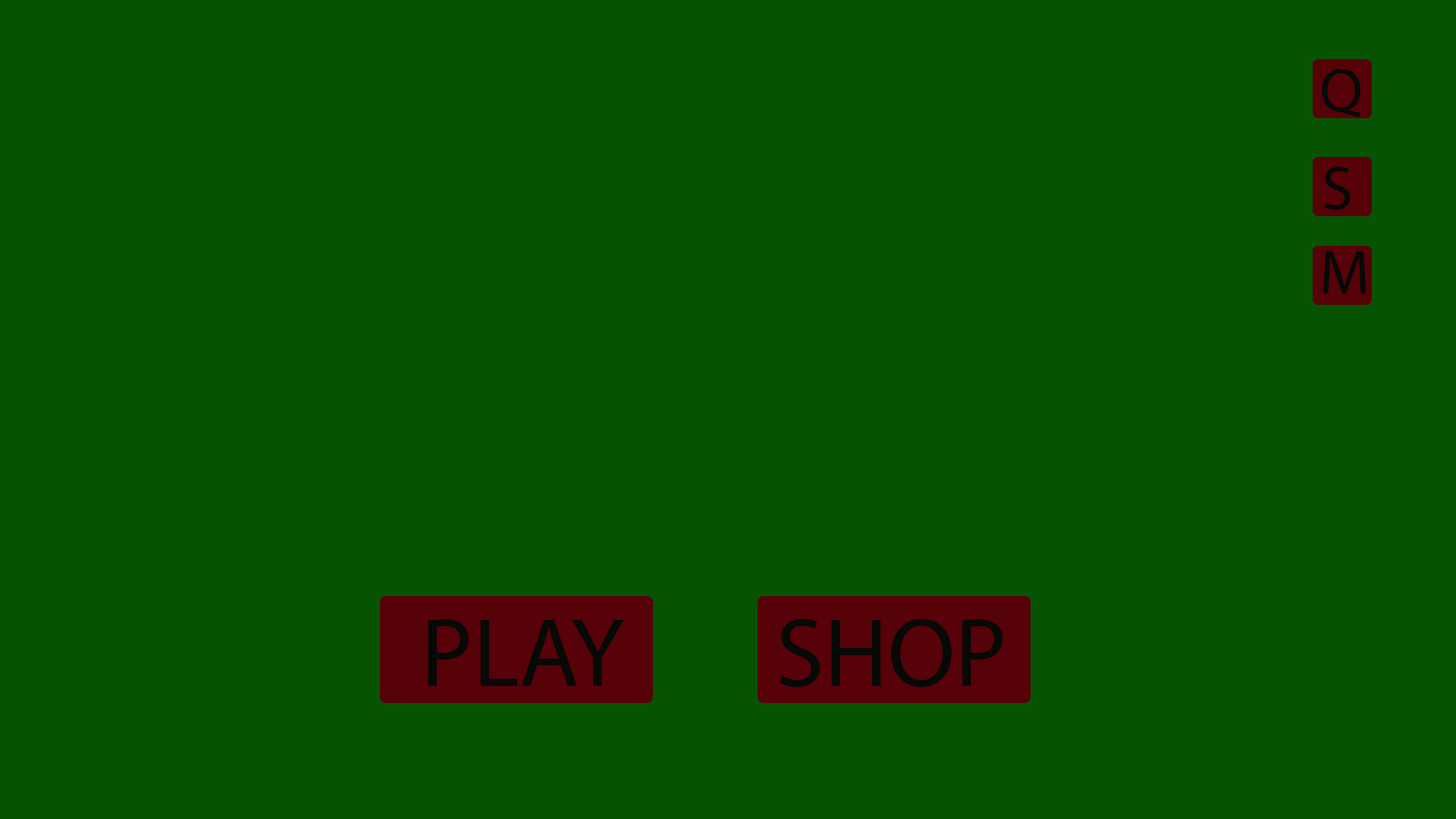
<style>
.page{position:relative;width:1456px;height:819px;background:#075304}
.page>*{position:absolute;margin:0}
.t1{font:62.6px "MyriadPro-Regular";color:#070907}
.t2{font:97.8px "MyriadPro-Regular";color:#070907}
</style>
<div class="page">
<p class="t1" style="left:1322px;top:69px;width:39px;height:49px">Q</p>
<p class="t1" style="left:1324px;top:166px;width:26px;height:44px">S</p>
<p class="t1" style="left:1323px;top:251px;width:43px;height:42px">M</p>
<p class="t2" style="left:428px;top:619px;width:196px;height:67px">PLAY</p>
<p class="t2" style="left:780px;top:618px;width:223px;height:70px">SHOP</p>
</div>
